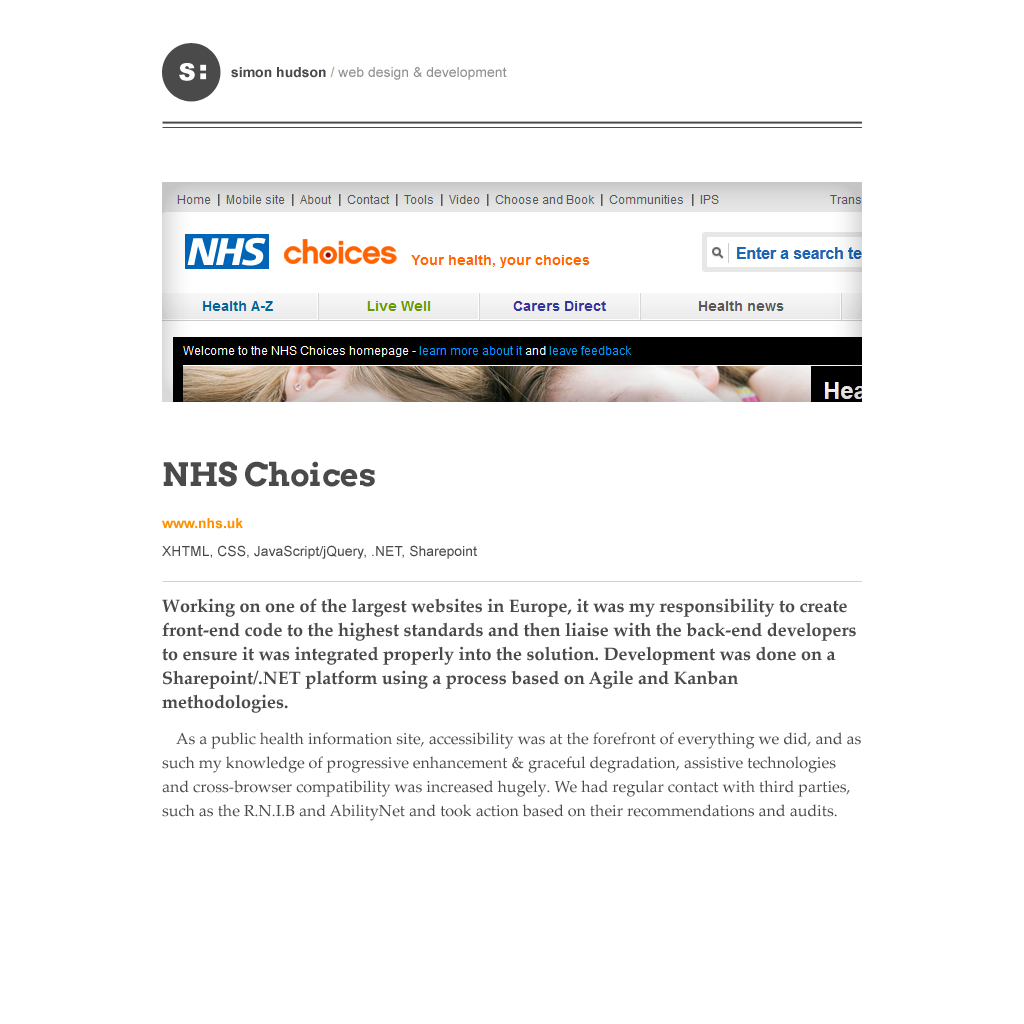
<style>
.page{position:relative;width:1024px;height:1024px;background:#ffffff}
.page>*{position:absolute;margin:0}
.t1{font:23.9px "Arial-Black";color:#ffffff}
.t2{font:14px "ArialMT";color:#909090}
.t3{font:14px "Arial-BoldMT";color:#4a4a4a}
.t4{font:14px "Arial-Black";color:#a1b59a}
.t5{font:16px/24px "PalatinoLinotype-Roman";color:#4a4a4a}
.t6{font:32px/24px "Arvo-Bold";color:#4a4a4a}
.t7{font:14px/42px "Arial-BoldMT";color:#ff9000}
.t8{font:14px/28px "ArialMT";color:#4a4a4a}
.t9{font:18px/56px "PalatinoLinotype-Bold";color:#4a4a4a}
.t10{font:18px/24px "PalatinoLinotype-Bold";color:#4a4a4a}
.t11{font:16px/36px "PalatinoLinotype-Roman";color:#4a4a4a}
</style>
<div class="page">
<p class="t1" style="left:179px;top:63px;width:16px;height:18px">S</p>
<p class="t2" style="left:231px;top:66px;width:276px;height:14px"><span class="t3">simon hudson </span><span class="t4">/ </span>web design &amp; development</p>
<p class="t5" style="left:162px;top:461px;width:699px;height:360px"><span class="t6">NHS Choices<br></span><span class="t7">www.nhs.uk<br></span><span class="t8">XHTML, CSS, JavaScript/jQuery, .NET, Sharepoint<br></span><span class="t9">Working on one of the largest websites in Europe, it was my responsibility to </span><span class="t10">create front-end code to the highest standards and then liaise with the back-end developers to ensure it was integrated properly into the solution. Development was done on a Sharepoint/.NET platform using a process based on Agile and Kanban methodologies.<br></span><span class="t11">As a public health information site, accessibility was at the</span> forefront of everything we did, and as such my knowledge of progressive enhancement &amp; graceful degradation, assistive technologies and cross-browser compatibility was increased hugely. We had regular contact with third parties, such as the R.N.I.B and AbilityNet and took action based on their recommendations and audits.<br><span class="t11">As part of my role, I was responsible for reviewing </span>wireframes/designs from the User Experience team and highlighting any potential issues regarding front-end implementation and/or accessibility. I worked closely with the Experience Architects and Designers to come up with solutions to any issues which arose and ensured they met all requirements, from both a front-end code and user experience point-of-view.<br><span class="t11">I was also required to respond quickly to bug reports, both </span>during the release cycle and once products had gone live. For this, I needed fast diagnostic skills regarding cross-browser issues and a thorough approach to testing my code fixes.</p>
</div>
